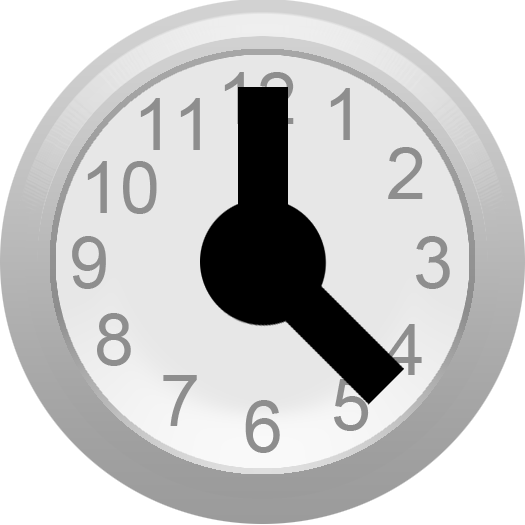
<style>
.page{position:relative;width:525px;height:525px;background:#e7e7e7}
.page>*{position:absolute;margin:0}
.t1{font:72px "ArialMT";color:#8e8e8e}
</style>
<div class="page">
<p class="t1" style="left:330px;top:88px;width:20px;height:52px">1</p>
<p class="t1" style="left:140px;top:98px;width:60px;height:52px">11</p>
<p class="t1" style="left:388px;top:147px;width:35px;height:52px">2</p>
<p class="t1" style="left:87px;top:161px;width:70px;height:53px">10</p>
<p class="t1" style="left:72px;top:236px;width:34px;height:53px">9</p>
<p class="t1" style="left:416px;top:236px;width:34px;height:53px">3</p>
<p class="t1" style="left:97px;top:313px;width:34px;height:53px">8</p>
<p class="t1" style="left:385px;top:324px;width:37px;height:51px">4</p>
<p class="t1" style="left:163px;top:375px;width:34px;height:51px">7</p>
<p class="t1" style="left:334px;top:379px;width:35px;height:52px">5</p>
<p class="t1" style="left:245px;top:400px;width:35px;height:53px">6</p>
</div>
